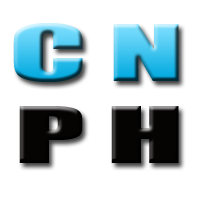
<style>
.page{position:relative;width:200px;height:200px;background:#ffffff}
.page>*{position:absolute;margin:0}
.t1{font:72px "Impact";letter-spacing:0.15em;scale:1.96 1}
.t2{font:72px "Impact";letter-spacing:0.15em;color:#060303;scale:1.96 1}
</style>
<div class="page">
<p class="t1" style="left:13px;top:23px;width:166px;height:59px">CN</p>
<p class="t2" style="left:19px;top:106px;width:160px;height:57px">PH</p>
</div>
